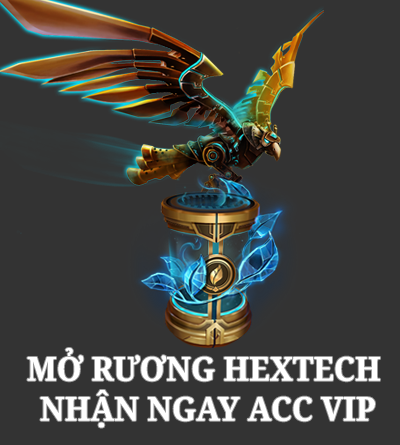
<style>
.page{position:relative;width:400px;height:445px;background:#333333}
.page>*{position:absolute;margin:0}
.t1{font:33px/40px "NotoSerif-Bold";color:#ffffff;scale:0.95 1}
</style>
<div class="page">
<p class="t1" style="left:27px;top:348px;width:353px;height:80px;text-align:center">MỞ RƯƠNG HEXTECH<br> NHẬN NGAY ACC VIP</p>
</div>
